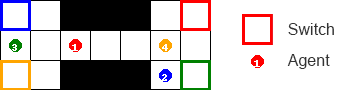
<style>
.page{position:relative;width:343px;height:90px;background:#ffffff}
.page>*{position:absolute;margin:0}
.t1{font:16px "ArialMT";color:#333333}
</style>
<div class="page">
<p class="t1" style="left:288px;top:23px;width:46px;height:12px">Switch</p>
<p class="t1" style="left:287px;top:54px;width:43px;height:15px">Agent</p>
</div>
